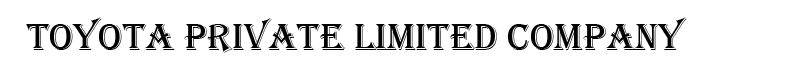
<style>
.page{position:relative;width:800px;height:75px;background:#ffffff}
.page>*{position:absolute;margin:0}
.t1{font:38.9px "Algerian";color:#000000}
</style>
<div class="page">
<p class="t1" style="left:26px;top:17px;width:661px;height:36px">TOYOTA PRIVATE LIMITED COMPANY</p>
</div>
